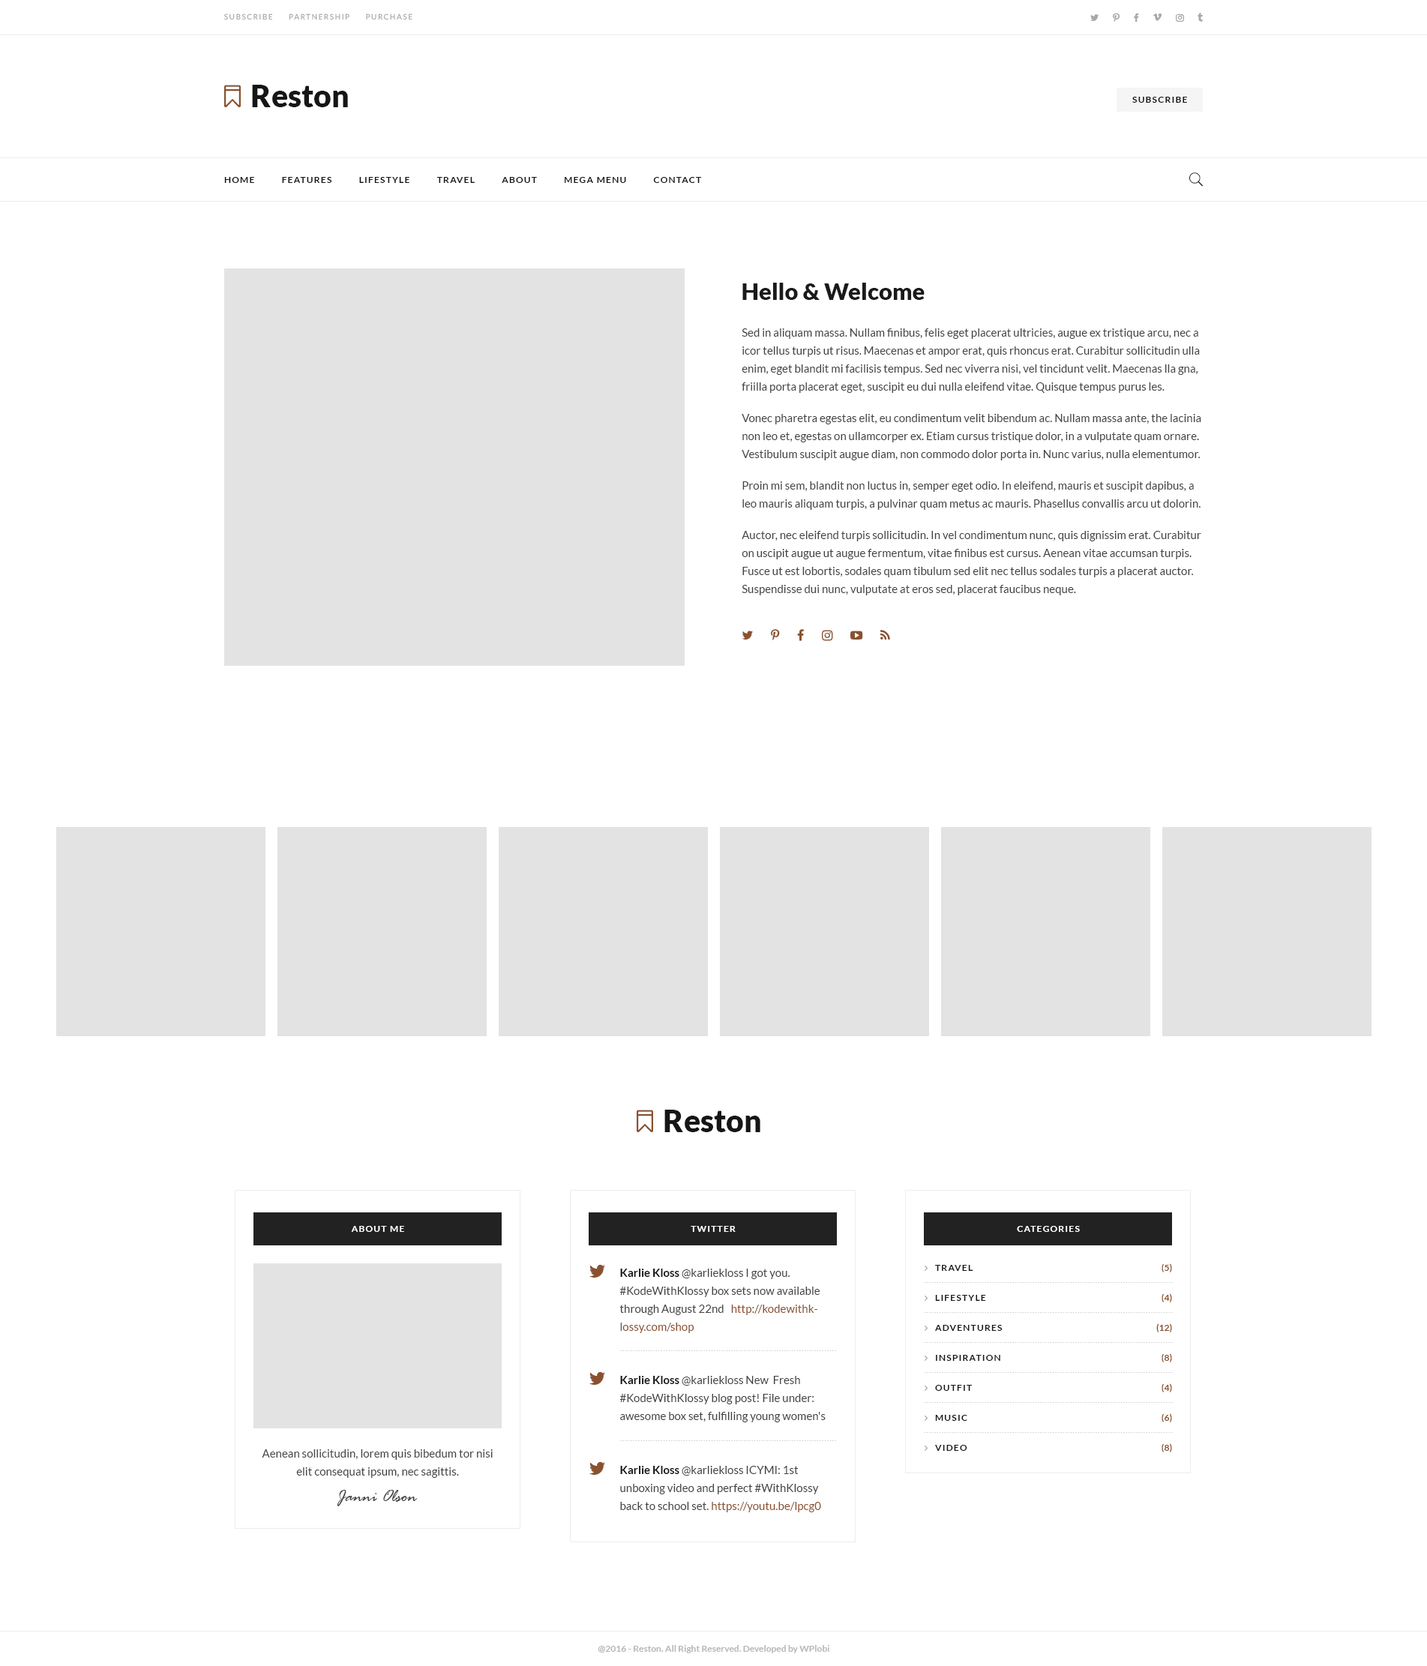
<style>
.page{position:relative;width:1427px;height:1666px;background:#ffffff}
.page>*{position:absolute;margin:0}
.t1{font:7.5px "Lato-Medium";letter-spacing:0.15em;color:#a8a8a8;text-transform:uppercase}
.t2{font:30.8px "Lato-Black";color:#161616}
.t3{font:9px "Lato-Bold";letter-spacing:0.1em;color:#171717;text-transform:uppercase}
.t4{font:23.2px "Lato-Black";color:#1a1a1a}
.t5{font:11.2px/18px "Lato-Regular";color:#424242}
.t6{font:11.2px/13.5px "Lato-Regular";color:#424242}
.t7{font:9px "Lato-Bold";letter-spacing:0.1em;color:#ffffff;text-transform:uppercase}
.t8{font:9px/30px "Lato-Bold";letter-spacing:0.1em;color:#171717;text-transform:uppercase}
.t9{font:9px/30px "Lato-Bold";color:#8a512f;text-transform:uppercase}
.t10{font:11.2px/18px "Lato-Bold";color:#161616}
.t11{font:11.2px/18px "Lato-Regular";color:#8a512f}
.t12{font:7.5px "Lato-Black";letter-spacing:0.1em;color:#cdcdcd}
.t13{font:18px "RageItalic";color:#414141}
.t14{font:9px "Lato-Bold";color:#b7b7b7}
</style>
<div class="page">
<p class="t1" style="left:224px;top:14px;width:188px;height:6px">Subscribe     partnership     Purchase</p>
<p class="t2" style="left:252px;top:85px;width:96px;height:22px">Reston</p>
<p class="t3" style="left:1132px;top:97px;width:55px;height:6px">Subscribe</p>
<p class="t3" style="left:224px;top:177px;width:478px;height:6px">Home          Features          Lifestyle          Travel          About          Mega Menu          Contact</p>
<p class="t4" style="left:742px;top:283px;width:183px;height:17px">Hello &amp; Welcome</p>
<p class="t5" style="left:742px;top:328px;width:460px;height:268px">Sed in aliquam massa. Nullam finibus, felis eget placerat ultricies, augue ex tristique arcu, nec a icor tellus turpis ut risus. Maecenas et ampor erat, quis rhoncus erat. Curabitur sollicitudin ulla enim, eget blandit mi facilisis tempus. Sed nec viverra nisi, vel tincidunt velit. Maecenas lla gna, friilla porta placerat eget, suscipit eu dui nulla eleifend vitae. Quisque tempus purus les.<span class="t6"> <br><br>V</span>onec pharetra egestas elit, eu condimentum velit bibendum ac. Nullam massa ante, the lacinia non leo et, egestas on ullamcorper ex. Etiam cursus tristique dolor, in a vulputate quam ornare. Vestibulum suscipit augue diam, non commodo dolor porta in. Nunc varius, nulla elementumor<span class="t6">. <br><br>P</span>roin mi sem, blandit non luctus in, semper eget odio. In eleifend, mauris et suscipit dapibus, a leo mauris aliquam turpis, a pulvinar quam metus ac mauris. Phasellus convallis arcu ut dolori<span class="t6">n.<br><br>A</span>uctor, nec eleifend turpis sollicitudin. In vel condimentum nunc, quis dignissim erat. Curabitur on uscipit augue ut augue fermentum, vitae finibus est cursus. Aenean vitae accumsan turpis. Fusce ut est lobortis, sodales quam tibulum sed elit nec tellus sodales turpis a placerat auctor.  Suspendisse dui nunc, vulputate at eros sed, placerat faucibus neque.</p>
<p class="t2" style="left:664px;top:1110px;width:96px;height:22px">Reston</p>
<p class="t7" style="left:351px;top:1226px;width:53px;height:6px">About Me</p>
<p class="t7" style="left:691px;top:1226px;width:45px;height:6px">Twitter</p>
<p class="t7" style="left:1017px;top:1226px;width:63px;height:6px">Categories</p>
<p class="t8" style="left:935px;top:1265px;width:68px;height:186px">Travel<br>Lifestyle<br>Adventures<br>Inspiration<br>Outfit<br>Music<br>Video</p>
<p class="t9" style="left:1156px;top:1264px;width:16px;height:189px;text-align:right">(5)<br>(4)<br>(12)<br>(8)<br>(4)<br>(6)<br>(8)</p>
<p class="t5" style="left:620px;top:1269px;width:200px;height:65px"><span class="t10">Karlie Kloss</span> @karliekloss I got you. #KodeWithKlossy box sets now available through August 22nd   <span class="t11">http://kodewithklossy.com/shop</span></p>
<p class="t12" style="left:924px;top:1282px;width:249px;height:1px">...................................................................................................</p>
<p class="t12" style="left:924px;top:1312px;width:249px;height:1px">...................................................................................................</p>
<p class="t12" style="left:924px;top:1342px;width:249px;height:1px">...................................................................................................</p>
<p class="t12" style="left:620px;top:1351px;width:216px;height:1px">......................................................................................</p>
<p class="t12" style="left:924px;top:1372px;width:249px;height:1px">...................................................................................................</p>
<p class="t5" style="left:620px;top:1376px;width:206px;height:47px"><span class="t10">Karlie Kloss</span> @karliekloss New  Fresh #KodeWithKlossy blog post! File under: awesome box set, fulfilling young women's</p>
<p class="t12" style="left:924px;top:1402px;width:249px;height:1px">...................................................................................................</p>
<p class="t12" style="left:924px;top:1432px;width:249px;height:1px">...................................................................................................</p>
<p class="t12" style="left:620px;top:1441px;width:216px;height:1px">......................................................................................</p>
<p class="t5" style="left:262px;top:1450px;width:231px;height:28px;text-align:center">Aenean sollicitudin, lorem quis bibedum tor nisi elit consequat ipsum, nec sagittis.</p>
<p class="t5" style="left:620px;top:1466px;width:201px;height:47px"><span class="t10">Karlie Kloss</span> @karliekloss ICYMI: 1st unboxing video and perfect #WithKlossy back to school set.<span class="t11"> https://youtu.be/lpcg0</span></p>
<p class="t13" style="left:337px;top:1490px;width:81px;height:17px">Janni Olson</p>
<p class="t14" style="left:598px;top:1646px;width:232px;height:8px">@2016 - Reston. All Right Reserved. Developed by WPlobi</p>
</div>
